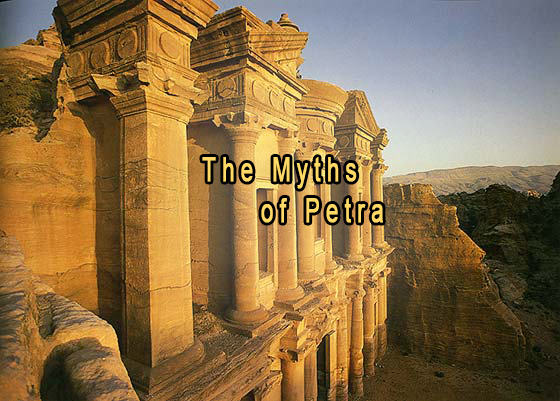
<style>
.page{position:relative;width:560px;height:401px}
.page>*{position:absolute;margin:0}
.t1{font:32.8px/40.7px "ArialMT";letter-spacing:0.28em;color:#ffd966;font-weight:bold;scale:0.66 1}
</style>
<div class="page">
<p class="t1" style="left:202px;top:157px;width:181px;height:66px">The Myths <br> of Petra</p>
</div>
